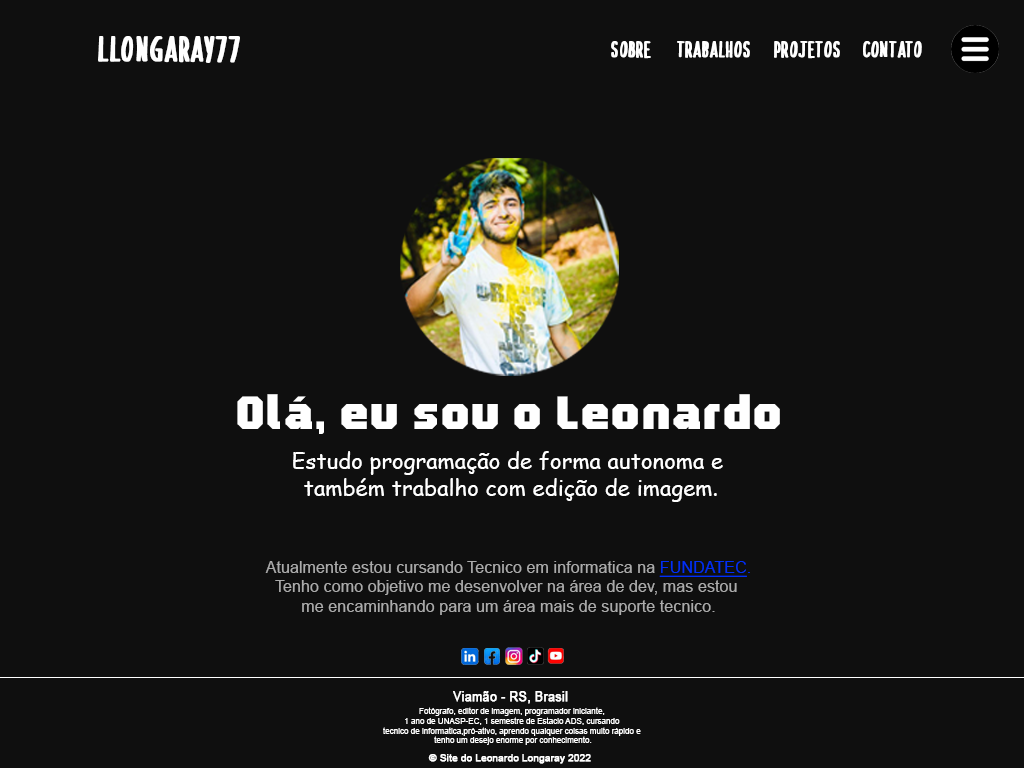
<style>
.page{position:relative;width:1024px;height:768px;background:#0f0f0f}
.page>*{position:absolute;margin:0}
.t1{font:50px "SilverCharmDuo";color:#ffffff;font-weight:bold}
.t2{font:31.2px "SilverCharmDuo";color:#ffffff;font-weight:bold}
.t3{font:31px "SilverCharmDuo";color:#ffffff;font-weight:bold}
.t4{font:31.3px "SilverCharmDuo";color:#ffffff;font-weight:bold}
.t5{font:79.7px "ProLamina";color:#ffffff}
.t6{font:22.2px "ComicSansMS";color:#ffffff}
.t7{font:16.2px "ArialMT";color:#ababab}
.t8{font:16.2px "ArialMT";color:#002ff7;text-decoration:underline}
.t9{font:16.2px "ArialMT";color:#002ff7}
.t10{font:12.7px "ArialMT";color:#ffffff;font-weight:bold}
.t11{font:8.2px "ArialMT";color:#ffffff}
.t12{font:10.1px "ArialMT";color:#ffffff;font-weight:bold}
</style>
<div class="page">
<p class="t1" style="left:98px;top:36px;width:142px;height:27px">llongaray77</p>
<p class="t2" style="left:611px;top:41px;width:40px;height:18px">sobre</p>
<p class="t3" style="left:677px;top:41px;width:73px;height:17px">trabalhos</p>
<p class="t4" style="left:774px;top:41px;width:66px;height:18px">projetos</p>
<p class="t4" style="left:863px;top:41px;width:59px;height:17px">contato</p>
<p class="t5" style="left:237px;top:394px;width:543px;height:40px">Olá, eu sou o Leonardo</p>
<p class="t6" style="left:293px;top:451px;width:430px;height:51px;text-align:center">Estudo programação de forma autonoma e <br>também trabalho com edição de imagem.</p>
<p class="t7" style="left:265px;top:561px;width:485px;height:54px;text-align:center">Atualmente estou cursando Tecnico em informatica na <span class="t8">FUNDATEC</span><span class="t9">.<br></span>Tenho como objetivo me desenvolver na área de dev, mas estou <br>me encaminhando para um área mais de suporte tecnico.</p>
<p class="t10" style="left:453px;top:691px;width:115px;height:13px">Viamão - RS, Brasil</p>
<p class="t11" style="left:383px;top:707px;width:258px;height:38px;text-align:center">Fotógrafo, editor de imagem, programador iniciante, <br>1 ano de UNASP-EC, 1 semestre de Estacio ADS, cursando <br>tecnico de informatica,pró-ativo, aprendo qualquer coisas muito rápido e <br>tenho um desejo enorme por conhecimento.</p>
<p class="t12" style="left:428px;top:754px;width:163px;height:10px">© Site do Leonardo Longaray 2022</p>
</div>
